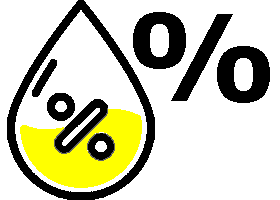
<style>
.page{position:relative;width:280px;height:200px;background:#ffffff}
.page>*{position:absolute;margin:0}
.t1{font:120px "Verdana-Bold";color:#000000}
</style>
<div class="page">
<p class="t1" style="left:133px;top:12px;width:137px;height:91px">%</p>
</div>
